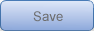
<style>
.page{position:relative;width:94px;height:31px}
.page>*{position:absolute;margin:0}
.t1{font:13.3px "ArialMT";color:#6e6e6e}
</style>
<div class="page">
<p class="t1" style="left:33px;top:11px;width:30px;height:11px">Save</p>
</div>
